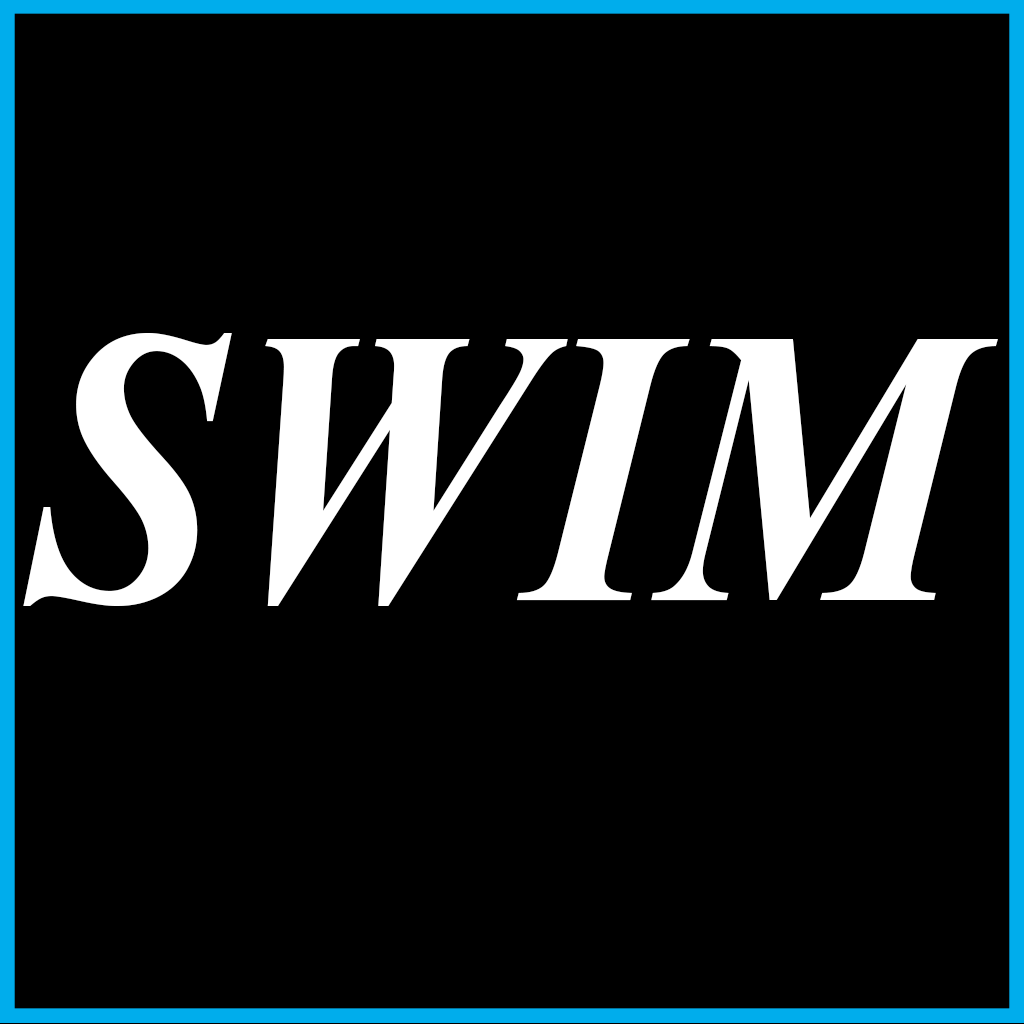
<style>
.page{position:relative;width:1024px;height:1024px;background:#000000}
.page>*{position:absolute;margin:0}
.t1{font:394px "TimesNewRomanPS-BoldItalicMT";color:#ffffff;scale:0.87 1}
</style>
<div class="page">
<p class="t1" style="left:23px;top:333px;width:975px;height:273px">SWIM</p>
</div>
